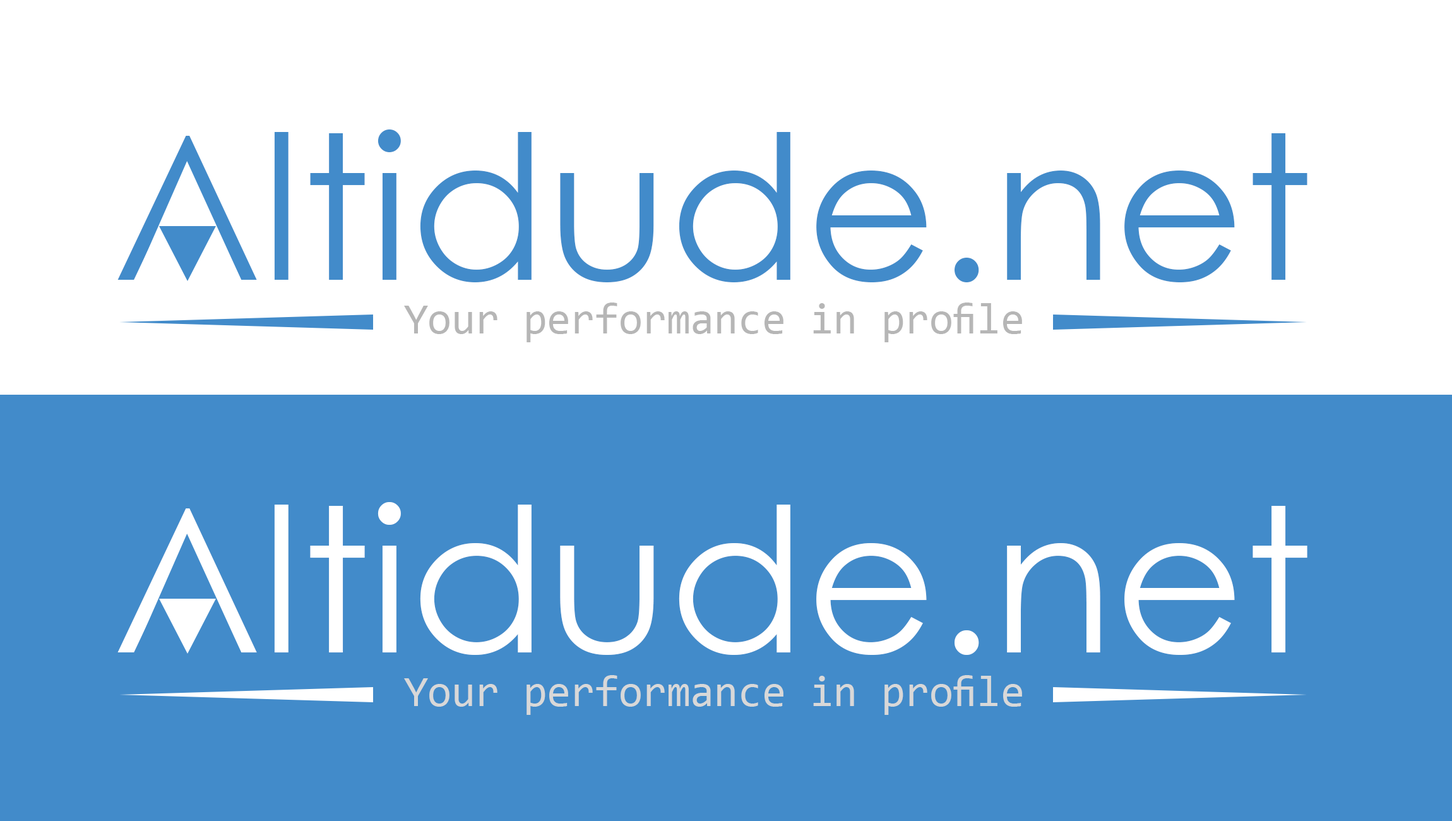
<style>
.page{position:relative;width:1452px;height:821px;background:#428bca}
.page>*{position:absolute;margin:0}
.t1{font:200.5px "CenturyGothic";color:#428bca}
.t2{font:43.4px "Consolas";color:#b6b6b6}
.t3{font:200.5px "CenturyGothic";color:#ffffff}
.t4{font:43.4px "Consolas";color:#d8d8d8}
</style>
<div class="page">
<p class="t1" style="left:117px;top:129px;width:1191px;height:153px">Altidude.net</p>
<p class="t2" style="left:404px;top:302px;width:618px;height:40px">Your performance in profile</p>
<p class="t3" style="left:117px;top:502px;width:1191px;height:153px">Altidude.net</p>
<p class="t4" style="left:404px;top:675px;width:618px;height:40px">Your performance in profile</p>
</div>
